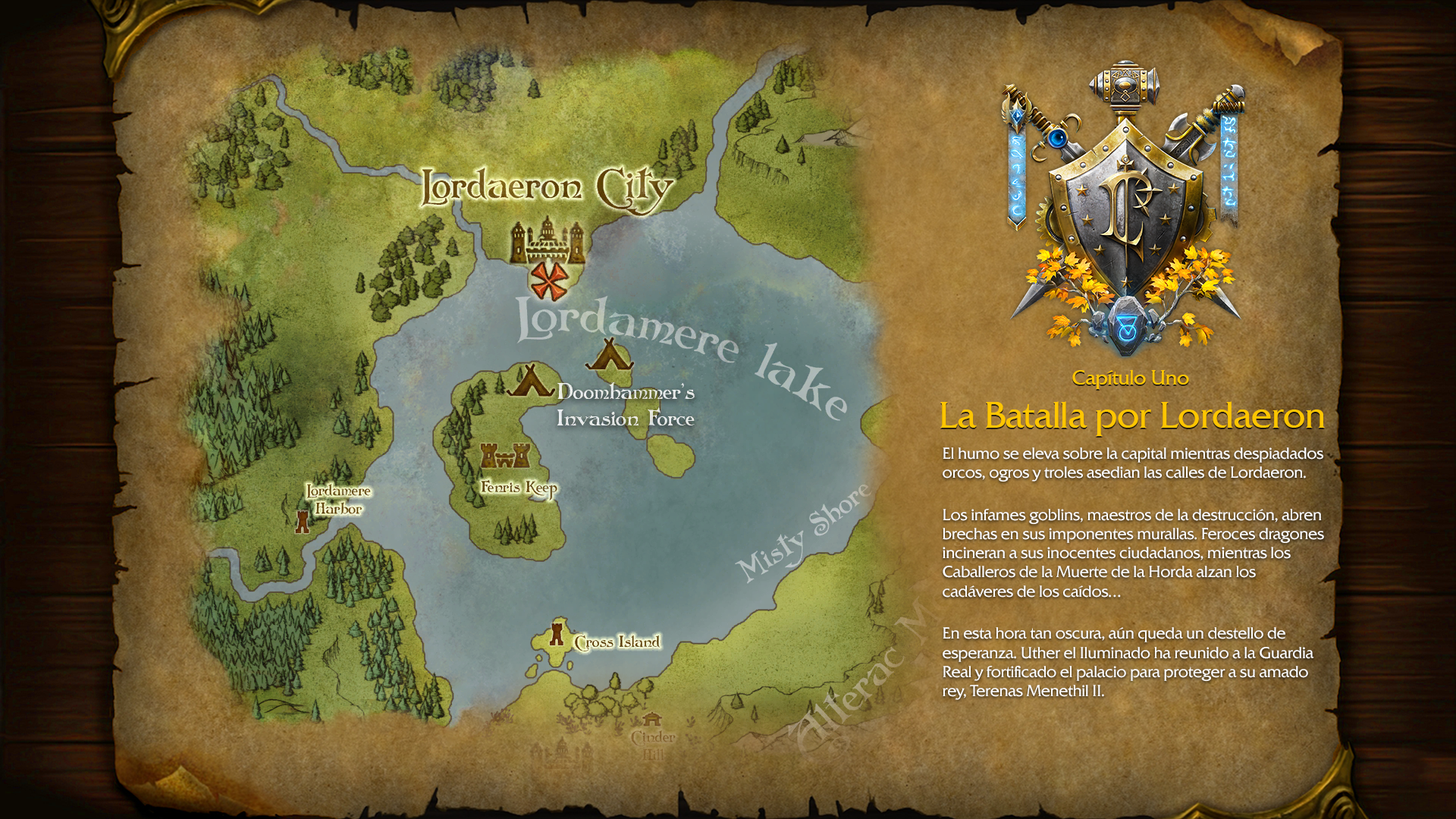
<style>
.page{position:relative;width:1456px;height:819px}
.page>*{position:absolute;margin:0}
.t1{font:20.2px "BlizQuadrata";color:#ffc600}
.t2{font:36.4px "BlizQuadrata";color:#ffc600}
.t3{font:15.9px "BlizQuadrata";color:#fefefe}
</style>
<div class="page">
<p class="t1" style="left:1072px;top:369px;width:117px;height:20px">Capítulo Uno</p>
<p class="t2" style="left:940px;top:401px;width:385px;height:35px">La Batalla por Lordaeron</p>
<p class="t3" style="left:943px;top:447px;width:381px;height:253px">El humo se eleva sobre la capital mientras despiadados orcos, ogros y troles asedian las calles de Lordaeron. <br><br>Los infames goblins, maestros de la destrucción, abren brechas en sus imponentes murallas. Feroces dragones incineran a sus inocentes ciudadanos, mientras los Caballeros de la Muerte de la Horda alzan los cadáveres de los caídos... <br><br>En esta hora tan oscura, aún queda un destello de esperanza. Uther el Iluminado ha reunido a la Guardia Real y fortificado el palacio para proteger a su amado rey, Terenas Menethil II.</p>
</div>
